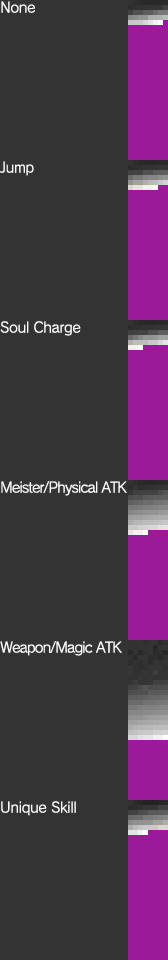
<style>
.page{position:relative;width:168px;height:960px;background:#333333}
.page>*{position:absolute;margin:0}
.t1{font:14px/160px "RodinNTLGPro-M";letter-spacing:-0.01em;color:#ffffff}
.t2{font:14px/160px "RodinNTLGPro-M";letter-spacing:-0.05em;color:#ffffff}
</style>
<div class="page">
<p class="t1" style="left:0px;top:1px;width:127px;height:815px">None<br>Jump<br>Soul Charge<br><span class="t2">Meister/Physical </span><span class="t2">ATK<br></span><span class="t2">Weapon/Magic ATK<br></span>Unique Skill</p>
</div>
